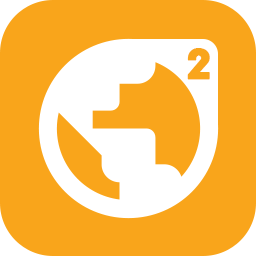
<style>
.page{position:relative;width:256px;height:256px;background:#f9a51b}
.page>*{position:absolute;margin:0}
.t1{font:40.8px "COCOGOOSE";color:#f9a51b;font-weight:bold}
</style>
<div class="page">
<p class="t1" style="left:187px;top:48px;width:23px;height:32px">2</p>
</div>
